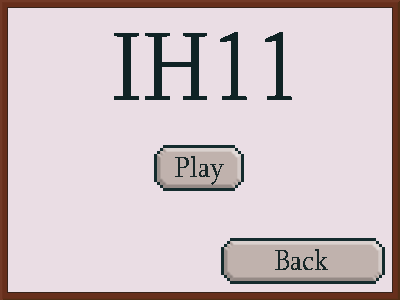
<style>
.page{position:relative;width:400px;height:300px;background:#eadde4}
.page>*{position:absolute;margin:0}
.t1{font:100px "Sylfaen";color:#102325;scale:0.9 1}
.t2{font:30px "Sylfaen";color:#182728;scale:0.9 1}
</style>
<div class="page">
<p class="t1" style="left:114px;top:32px;width:178px;height:68px">IH11</p>
<p class="t2" style="left:175px;top:156px;width:49px;height:29px">Play</p>
<p class="t2" style="left:275px;top:249px;width:53px;height:21px">Back</p>
</div>
